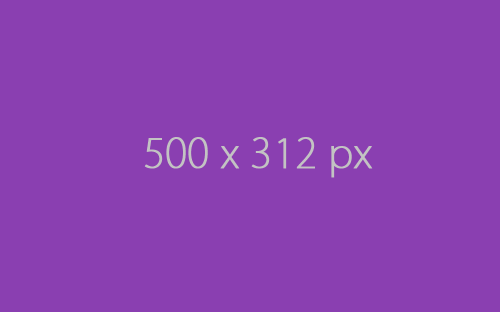
<style>
.page{position:relative;width:500px;height:312px;background:#8a3fb1}
.page>*{position:absolute;margin:0}
.t1{font:39.9px "KozGoPro-ExtraLight";color:#c3c3c3;font-weight:bold}
</style>
<div class="page">
<p class="t1" style="left:144px;top:137px;width:229px;height:41px">500 x 312 px</p>
</div>
